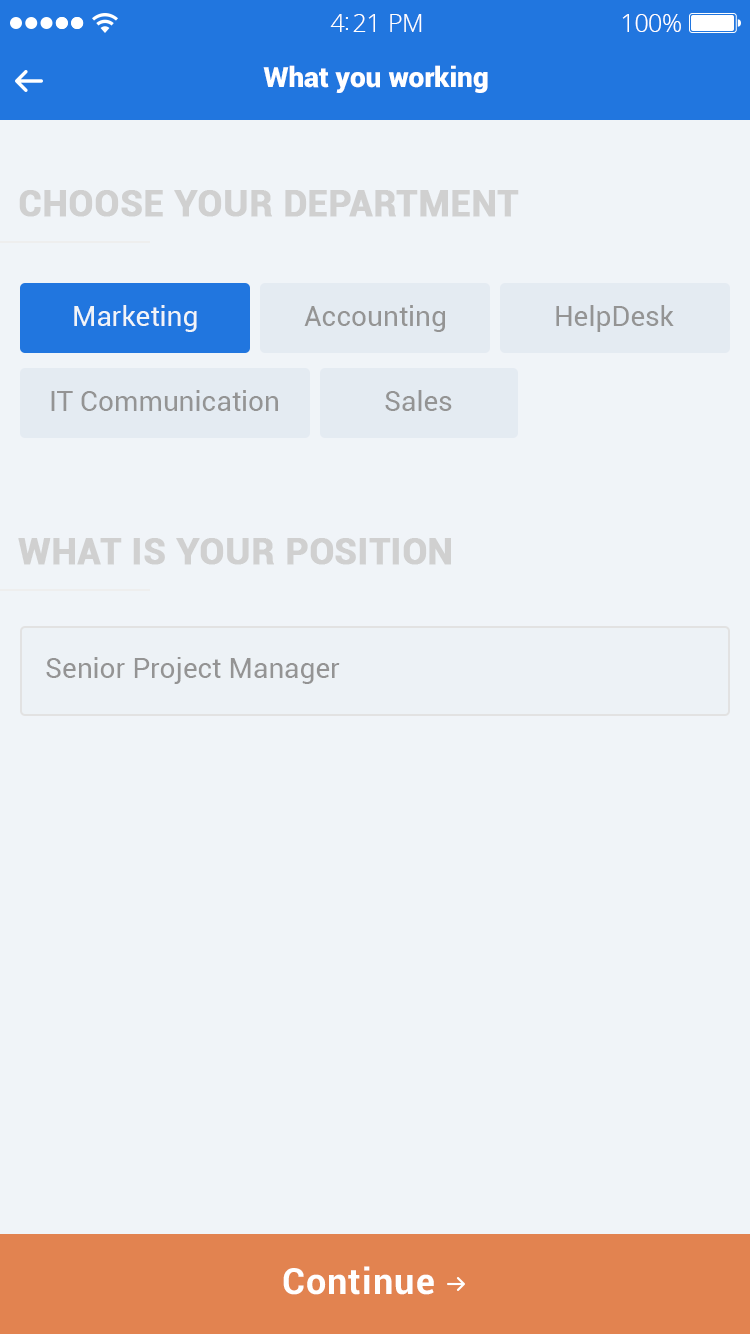
<style>
.page{position:relative;width:750px;height:1334px;background:#f0f4f8}
.page>*{position:absolute;margin:0}
.t1{font:25px "OpenSans-Light";letter-spacing:-0.02em;color:#ffffff}
.t2{font:28px "Roboto-Black";color:#ffffff}
.t3{font:36px "Roboto-Bold";color:#d0d0d0;text-transform:uppercase;font-weight:bold}
.t4{font:28px "Roboto-Regular";color:#f0f4f8}
.t5{font:28px "Roboto-Regular";color:#949494}
.t6{font:36px "Roboto-Bold";letter-spacing:0.03em;color:#ffffff}
</style>
<div class="page">
<p class="t1" style="left:330px;top:14px;width:92px;height:18px">4:21 PM</p>
<p class="t1" style="left:622px;top:14px;width:59px;height:18px">100%</p>
<p class="t2" style="left:263px;top:65px;width:225px;height:28px">What you working</p>
<p class="t3" style="left:19px;top:190px;width:500px;height:27px">Choose your department</p>
<p class="t4" style="left:74px;top:305px;width:123px;height:27px">Marketing</p>
<p class="t5" style="left:304px;top:305px;width:141px;height:27px">Accounting</p>
<p class="t5" style="left:556px;top:305px;width:118px;height:27px">HelpDesk</p>
<p class="t5" style="left:51px;top:390px;width:227px;height:21px">IT Communication</p>
<p class="t5" style="left:385px;top:390px;width:67px;height:21px">Sales</p>
<p class="t3" style="left:18px;top:538px;width:433px;height:27px">What is your position</p>
<p class="t5" style="left:46px;top:657px;width:294px;height:27px">Senior Project Manager</p>
<p class="t6" style="left:283px;top:1266px;width:151px;height:29px">Continue</p>
</div>
